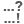
<style>
.page{position:relative;width:24px;height:24px;background:#ffffff}
.page>*{position:absolute;margin:0}
.t1{font:14px "Helvetica-Bold";color:#5a5a5a}
</style>
<div class="page">
<p class="t1" style="left:3px;top:1px;width:20px;height:10px">...?</p>
<p class="t1" style="left:4px;top:13px;width:16px;height:10px">...!</p>
</div>
